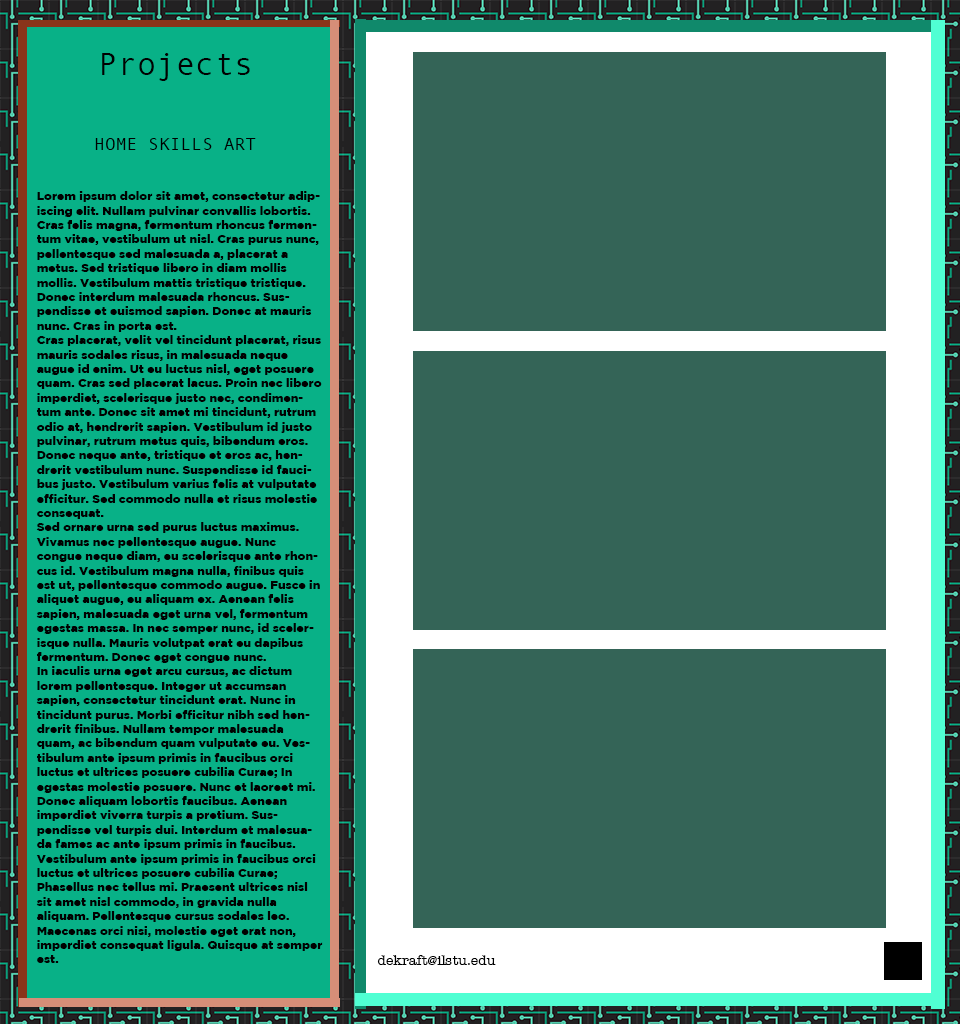
<style>
.page{position:relative;width:960px;height:1024px;background:#346457}
.page>*{position:absolute;margin:0}
.t1{font:32.4px "AndaleMono";color:#010101}
.t2{font:18px "AndaleMono";color:#000000}
.t3{font:12px "GothamBlack";color:#010101}
.t4{font:14px "AmericanTypewriter";color:#000000}
</style>
<div class="page">
<p class="t1" style="left:102px;top:53px;width:148px;height:28px">Projects</p>
<p class="t2" style="left:95px;top:138px;width:161px;height:12px">HOME SKILLS ART</p>
<p class="t3" style="left:36px;top:191px;width:287px;height:772px">Lorem ipsum dolor sit amet, consectetur adipiscing elit. Nullam pulvinar convallis lobortis. Cras felis magna, fermentum rhoncus fermentum vitae, vestibulum ut nisl. Cras purus nunc, pellentesque sed malesuada a, placerat a metus. Sed tristique libero in diam mollis mollis. Vestibulum mattis tristique tristique. Donec interdum malesuada rhoncus. Suspendisse et euismod sapien. Donec at mauris nunc. Cras in porta est.<br>Cras placerat, velit vel tincidunt placerat, risus mauris sodales risus, in malesuada neque augue id enim. Ut eu luctus nisl, eget posuere quam. Cras sed placerat lacus. Proin nec libero imperdiet, scelerisque justo nec, condimentum ante. Donec sit amet mi tincidunt, rutrum odio at, hendrerit sapien. Vestibulum id justo pulvinar, rutrum metus quis, bibendum eros. Donec neque ante, tristique et eros ac, hendrerit vestibulum nunc. Suspendisse id faucibus justo. Vestibulum varius felis at vulputate efficitur. Sed commodo nulla et risus molestie consequat.<br>Sed ornare urna sed purus luctus maximus. Vivamus nec pellentesque augue. Nunc congue neque diam, eu scelerisque ante rhoncus id. Vestibulum magna nulla, finibus quis est ut, pellentesque commodo augue. Fusce in aliquet augue, eu aliquam ex. Aenean felis sapien, malesuada eget urna vel, fermentum egestas massa. In nec semper nunc, id scelerisque nulla. Mauris volutpat erat eu dapibus fermentum. Donec eget congue nunc.<br>In iaculis urna eget arcu cursus, ac dictum lorem pellentesque. Integer ut accumsan sapien, consectetur tincidunt erat. Nunc in tincidunt purus. Morbi efficitur nibh sed hendrerit finibus. Nullam tempor malesuada quam, ac bibendum quam vulputate eu. Vestibulum ante ipsum primis in faucibus orci luctus et ultrices posuere cubilia Curae; In egestas molestie posuere. Nunc et laoreet mi.<br>Donec aliquam lobortis faucibus. Aenean imperdiet viverra turpis a pretium. Suspendisse vel turpis dui. Interdum et malesuada fames ac ante ipsum primis in faucibus. Vestibulum ante ipsum primis in faucibus orci luctus et ultrices posuere cubilia Curae; Phasellus nec tellus mi. Praesent ultrices nisl sit amet nisl commodo, in gravida nulla aliquam. Pellentesque cursus sodales leo. Maecenas orci nisi, molestie eget erat non, imperdiet consequat ligula. Quisque at semper est.</p>
<p class="t4" style="left:377px;top:955px;width:119px;height:10px">dekraft@ilstu.edu</p>
</div>
